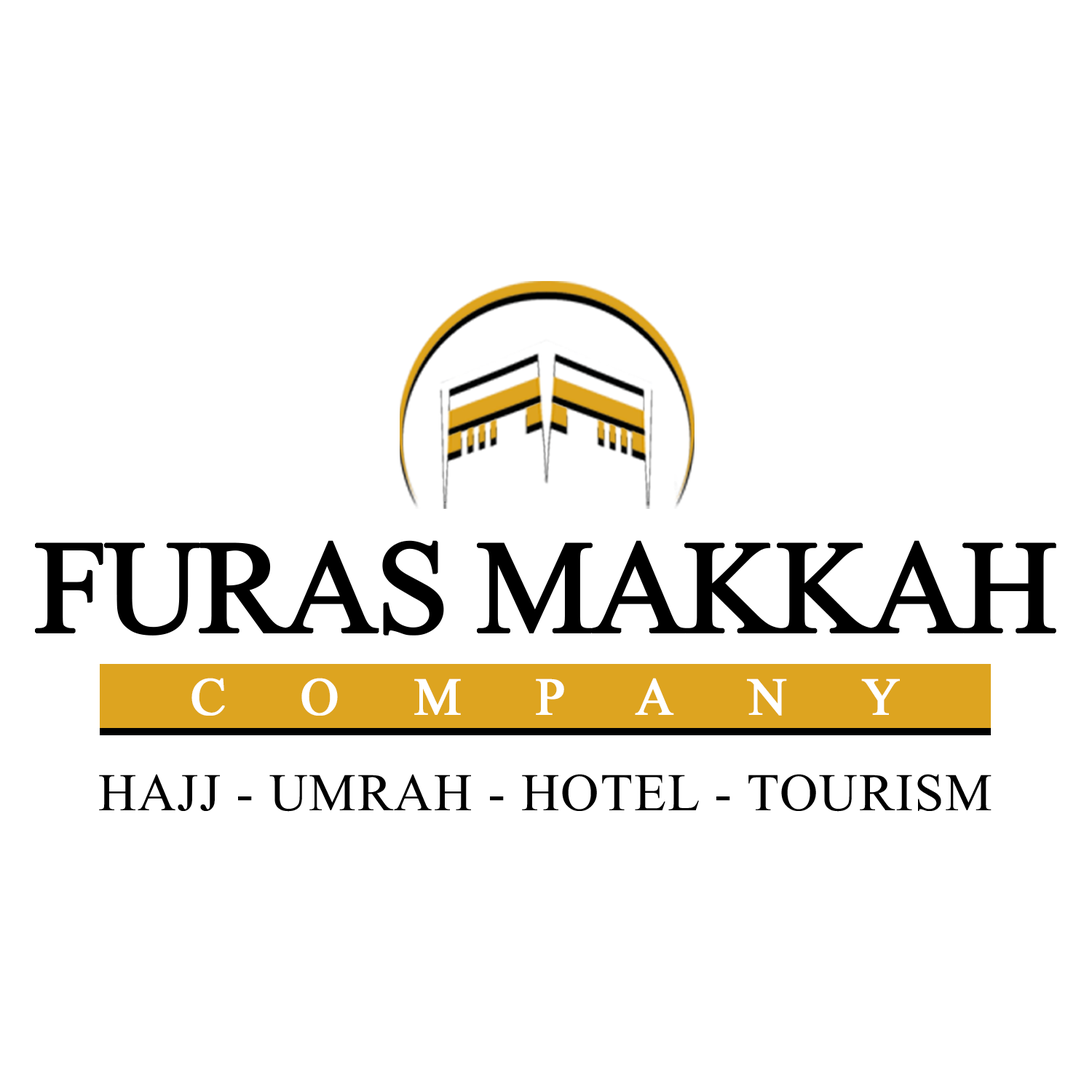
<style>
.page{position:relative;width:1092px;height:1092px;background:#ffffff}
.page>*{position:absolute;margin:0}
.t1{font:132.2px "MongolianBaiti";letter-spacing:-0.05em;color:#000000;text-transform:uppercase;font-weight:bold}
.t2{font:53px "MongolianBaiti";letter-spacing:1.4em;color:#ffffff;text-transform:uppercase;font-weight:bold}
.t3{font:52.9px "MongolianBaiti";letter-spacing:0.025em;color:#000000;text-transform:uppercase}
</style>
<div class="page">
<p class="t1" style="left:35px;top:540px;width:1021px;height:96px">Furas makkah</p>
<p class="t2" style="left:191px;top:678px;width:709px;height:38px">Company</p>
<p class="t3" style="left:99px;top:774px;width:893px;height:38px">Hajj - Umrah - Hotel - Tourism</p>
</div>
